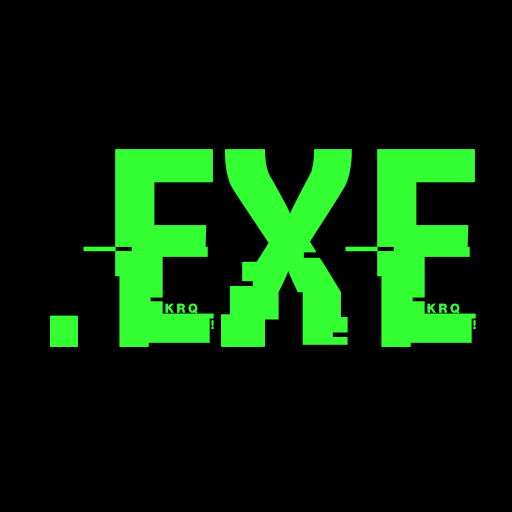
<style>
.page{position:relative;width:512px;height:512px;background:#000000}
.page>*{position:absolute;margin:0}
.t1{font:282.8px "HACKED";color:#33ff33}
</style>
<div class="page">
<p class="t1" style="left:50px;top:149px;width:426px;height:198px">.ExE</p>
</div>
